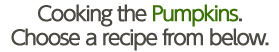
<style>
.page{position:relative;width:279px;height:52px;background:#ffffff}
.page>*{position:absolute;margin:0}
.t1{font:20px/24px "UDShinGoPro-Regular";letter-spacing:-0.08em;color:#4c4843;font-weight:bold}
.t2{font:20px/24px "UDShinGoPro-Regular";letter-spacing:-0.08em;color:#3a7103;font-weight:bold}
</style>
<div class="page">
<p class="t1" style="left:11px;top:4px;width:258px;height:47px;text-align:center">Cooking the <span class="t2">Pumpkins</span>.<br>Choose a recipe from below.</p>
</div>
